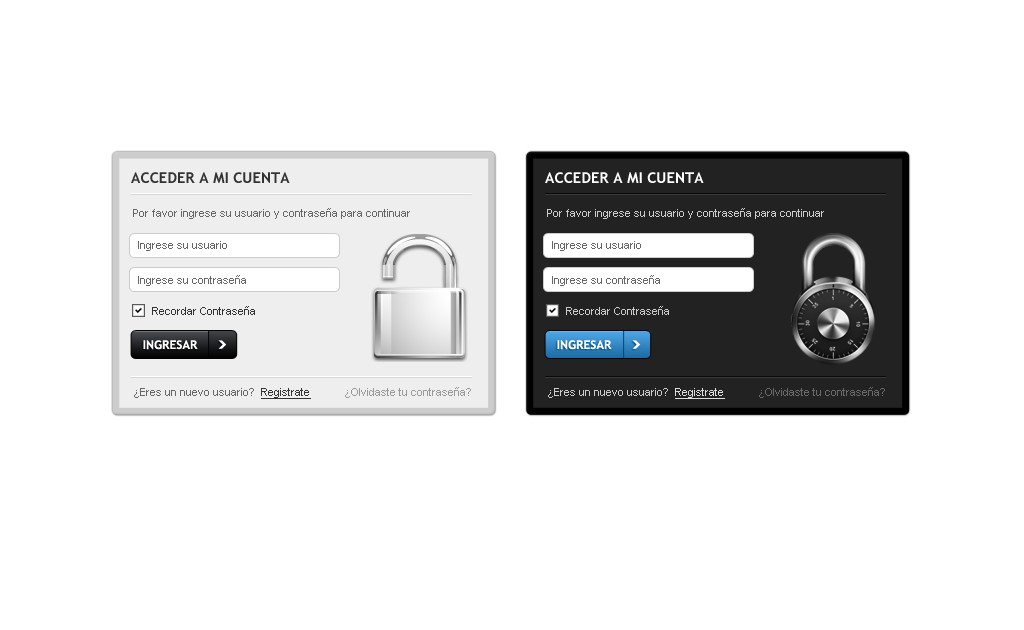
<style>
.page{position:relative;width:1024px;height:630px;background:#ffffff}
.page>*{position:absolute;margin:0}
.t1{font:15px "TrebuchetMS-Bold";color:#333333;text-transform:uppercase}
.t2{font:15px "TrebuchetMS-Bold";color:#fefefe;text-transform:uppercase}
.t3{font:11px "ArialMT";color:#666666}
.t4{font:11px "ArialMT";color:#cccccc}
.t5{font:11px "ArialMT";color:#333333}
.t6{font:12px "TrebuchetMS-Bold";color:#ffffff;text-transform:uppercase}
.t7{font:11px "ArialMT";color:#333333;text-decoration:underline}
.t8{font:11px "ArialMT";color:#999999}
.t9{font:11px "ArialMT";color:#dddddd;text-decoration:underline}
.t10{font:11px "ArialMT";color:#6a6a6a}
</style>
<div class="page">
<p class="t1" style="left:131px;top:172px;width:159px;height:11px">Acceder a mi cuenta</p>
<p class="t2" style="left:545px;top:172px;width:159px;height:11px">Acceder a mi cuenta</p>
<p class="t3" style="left:133px;top:208px;width:277px;height:11px">Por favor ingrese su usuario y contraseña para continuar</p>
<p class="t4" style="left:547px;top:208px;width:277px;height:11px">Por favor ingrese su usuario y contraseña para continuar</p>
<p class="t3" style="left:138px;top:241px;width:89px;height:10px">Ingrese su usuario</p>
<p class="t3" style="left:552px;top:241px;width:89px;height:10px">Ingrese su usuario</p>
<p class="t3" style="left:138px;top:275px;width:108px;height:11px">Ingrese su contraseña</p>
<p class="t3" style="left:552px;top:275px;width:108px;height:11px">Ingrese su contraseña</p>
<p class="t5" style="left:152px;top:306px;width:103px;height:9px">Recordar Contraseña</p>
<p class="t4" style="left:566px;top:306px;width:103px;height:9px">Recordar Contraseña</p>
<p class="t6" style="left:143px;top:340px;width:55px;height:10px">ingresar</p>
<p class="t6" style="left:557px;top:340px;width:55px;height:10px">ingresar</p>
<p class="t3" style="left:134px;top:388px;width:177px;height:11px">¿Eres un nuevo usuario?  <span class="t7">Registrate</span></p>
<p class="t8" style="left:345px;top:387px;width:126px;height:11px">¿Olvidaste tu contraseña?</p>
<p class="t4" style="left:548px;top:388px;width:177px;height:11px">¿Eres un nuevo usuario?  <span class="t9">Registrate</span></p>
<p class="t10" style="left:759px;top:387px;width:126px;height:11px">¿Olvidaste tu contraseña?</p>
</div>
